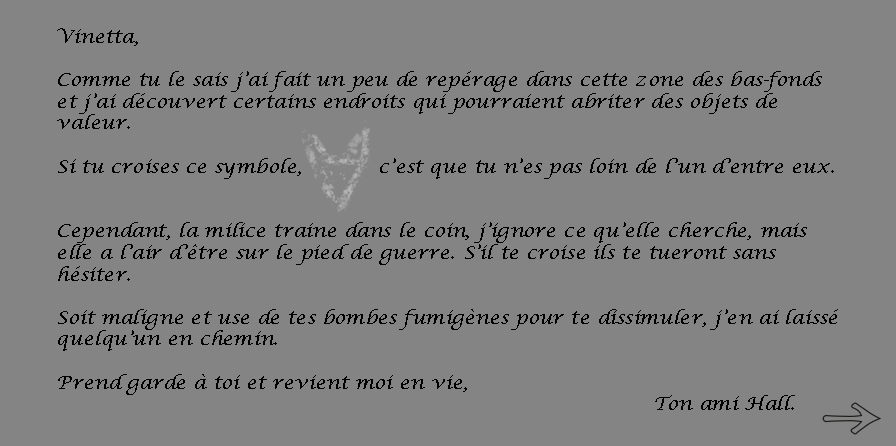
<style>
.page{position:relative;width:896px;height:446px;background:#848484}
.page>*{position:absolute;margin:0}
.t1{font:18px "LucidaCalligraphy-Italic";color:#000000;scale:1.05 1}
</style>
<div class="page">
<p class="t1" style="left:57px;top:28px;width:781px;height:382px">Vinetta,<br><br>Comme tu le sais j’ai fait un peu de repérage dans cette zone des bas-fonds et j’ai découvert certains endroits qui pourraient abriter des objets de valeur.<br><br>Si tu croises ce symbole,           c’est que tu n’es pas loin de l’un d’entre eux.<br><br><br>Cependant, la milice traine dans le coin, j’ignore ce qu’elle cherche, mais elle a l’air d’être sur le pied de guerre. S’il te croise ils te tueront sans hésiter. <br><br>Soit maligne et use de tes bombes fumigènes pour te dissimuler, j’en ai laissé quelqu’un en chemin. <br><br>Prend garde à toi et revient moi en vie,<br>             Ton ami Hall.</p>
</div>
